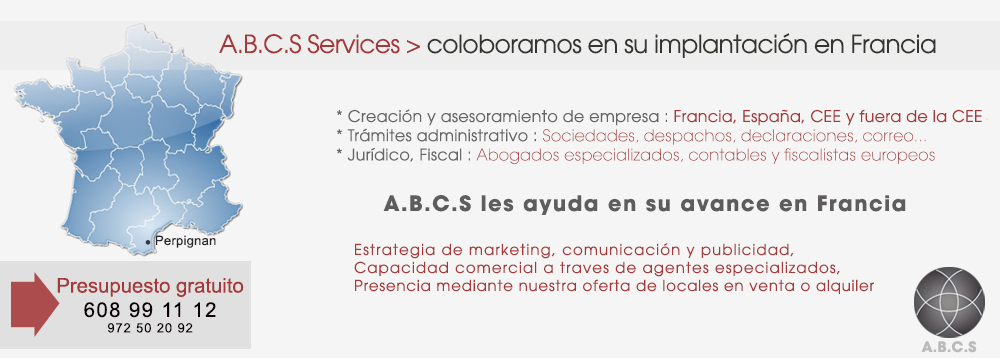
<style>
.page{position:relative;width:1000px;height:358px;background:#f5f5f5}
.page>*{position:absolute;margin:0}
.t1{font:25px "AvantGardeLT-Book";letter-spacing:-0.025em;color:#35342e}
.t2{font:25px "AvantGardeLT-Book";letter-spacing:-0.025em;color:#a53838}
.t3{font:16px "AvantGardeLT-ExtraLight";letter-spacing:0.015em;color:#a53838}
.t4{font:16px "AvantGardeLT-Book";letter-spacing:0.015em;color:#666666}
.t5{font:16px "AvantGardeLT-Book";letter-spacing:0.015em;color:#a53838}
.t6{font:16px "AvantGardeLT-ExtraLight";letter-spacing:0.015em}
.t7{font:21px "AvantGardeLT-Bold";letter-spacing:0.07em;color:#5e5c5c}
.t8{font:13px "ArialMT";letter-spacing:0.02em;color:#2b2728}
.t9{font:15px "AvantGardeLT-Book";letter-spacing:0.07em;color:#a53838}
.t10{font:15px "AvantGardeLT-Book";letter-spacing:0.05em;color:#a53838}
.t11{font:20.3px "ArialMT";color:#a53838}
.t12{font:20.3px "ArialMT";letter-spacing:0.07em;color:#0a0202}
.t13{font:12.9px "ArialMT";letter-spacing:0.07em;color:#0a0202}
.t14{font:14.4px "AvantGardeLT-Bold";letter-spacing:0.01em;color:#bababa}
</style>
<div class="page">
<p class="t1" style="left:219px;top:33px;width:717px;height:25px"><span class="t2">A.B.C.S Services &gt; </span>coloboramos en su implantación en Francia</p>
<p class="t3" style="left:336px;top:109px;width:646px;height:56px"><span class="t4">* Creación y asesoramiento de empresa : </span><span class="t5">Francia, España, CEE y fuera de la CEE<br></span><span class="t4">* Trámites administrativo : </span>Sociedades, despachos, declaraciones, correo...<br><span class="t4">* Jurídico, Fiscal : </span>Abogados especializados, contables y fiscalistas europeos</p>
<p class="t6" style="left:986px;top:118px;width:2px;height:2px">.</p>
<p class="t7" style="left:383px;top:195px;width:523px;height:20px">A.B.C.S les ayuda en su avance en Francia</p>
<p class="t8" style="left:156px;top:235px;width:60px;height:13px">Perpignan</p>
<p class="t9" style="left:354px;top:243px;width:520px;height:51px">Estrategia de marketing, comunicación y publicidad, <br>Capacidad comercial a traves de agentes especializados,<br><span class="t10">Presencia mediante nuestra oferta de locales en venta o alquiler</span></p>
<p class="t11" style="left:57px;top:278px;width:187px;height:55px;text-align:center">Presupuesto gratuito<br><span class="t12">608 99 11 12<br></span><span class="t13">972 50 20 92</span></p>
<p class="t14" style="left:921px;top:341px;width:56px;height:12px">A.B.C.S</p>
</div>
